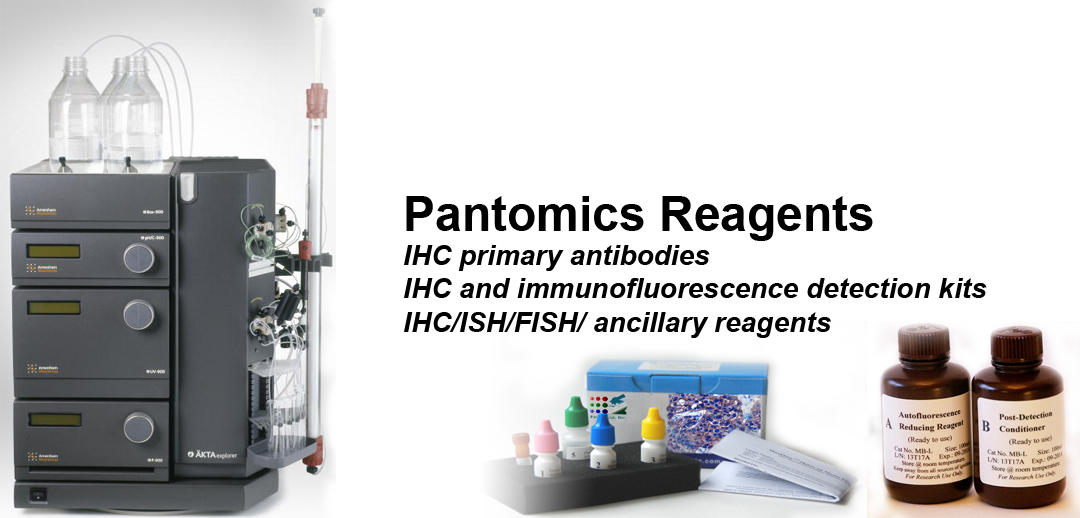
<style>
.page{position:relative;width:1080px;height:518px;background:#ffffff}
.page>*{position:absolute;margin:0}
.t1{font:28px "Arial-BoldItalicMT";color:#000000}
.t2{font:48px "Arial-BoldMT";color:#000000}
</style>
<div class="page">
<p class="t1" style="left:404px;top:196px;width:583px;height:142px"><span class="t2">Pantomics Reagents<br></span>IHC primary antibodies<br>IHC and immunofluorescence detection kits<br>IHC/ISH/FISH/ ancillary reagents</p>
</div>
